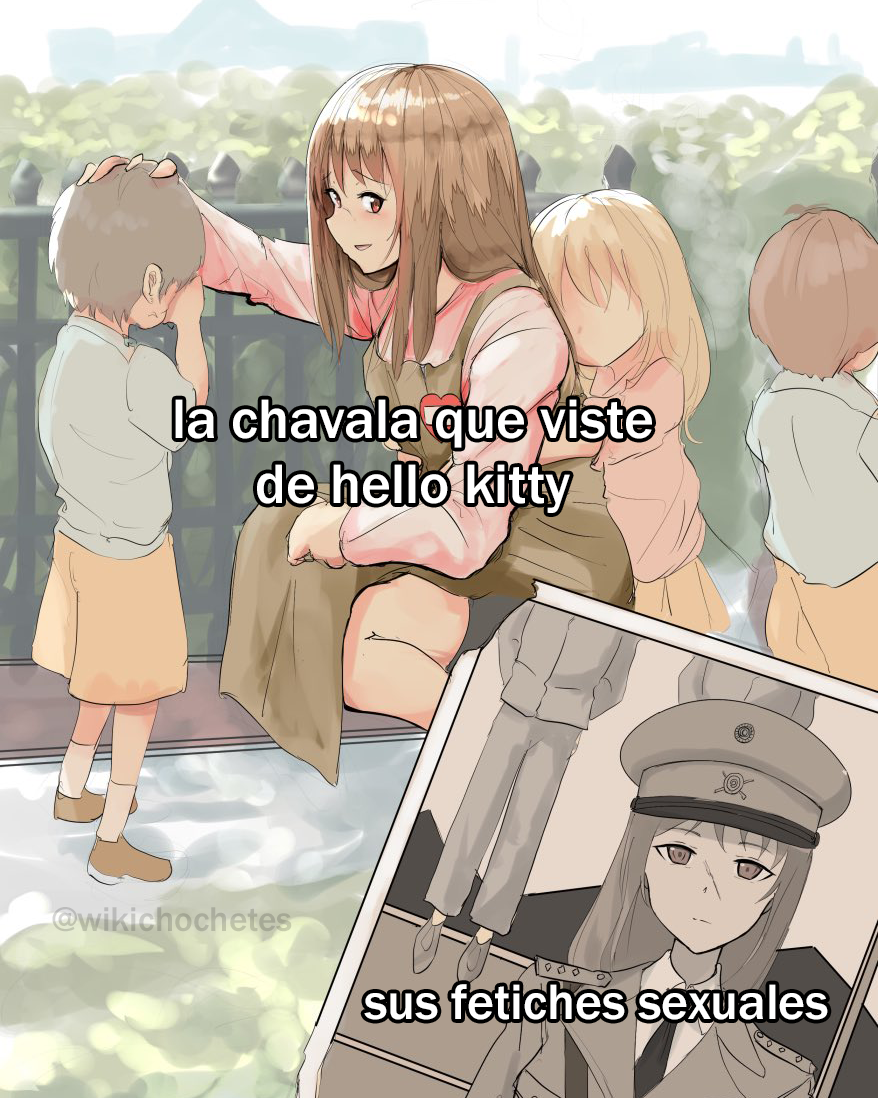
<style>
.page{position:relative;width:878px;height:1098px}
.page>*{position:absolute;margin:0}
.t1{font:57.3px "FranklinGothic-Medium";color:#ffffff}
.t2{font:35.4px "FranklinGothic-Medium";color:#b2b5a2}
.t3{font:51.4px "FranklinGothic-Medium";color:#ffffff}
</style>
<div class="page">
<p class="t1" style="left:175px;top:399px;width:477px;height:114px;text-align:center">la chavala que viste<br>de hello kitty</p>
<p class="t2" style="left:52px;top:907px;width:240px;height:25px">@wikichochetes</p>
<p class="t3" style="left:364px;top:984px;width:464px;height:36px">sus fetiches sexuales</p>
</div>
